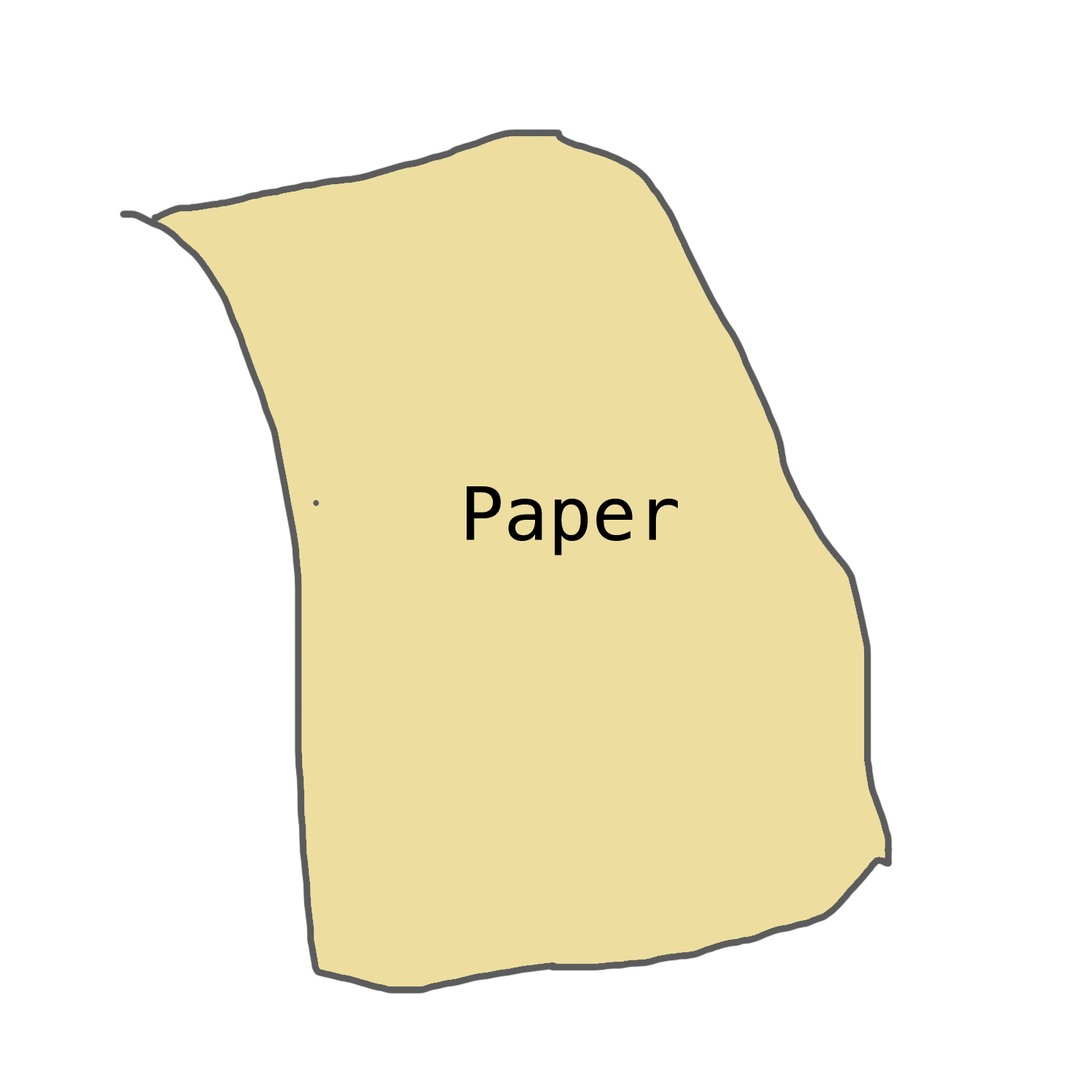
<style>
.page{position:relative;width:1092px;height:1092px;background:#ffffff}
.page>*{position:absolute;margin:0}
.t1{font:73.3px "Menlo-Regular";color:#000000}
</style>
<div class="page">
<p class="t1" style="left:467px;top:486px;width:211px;height:69px">Paper</p>
</div>
